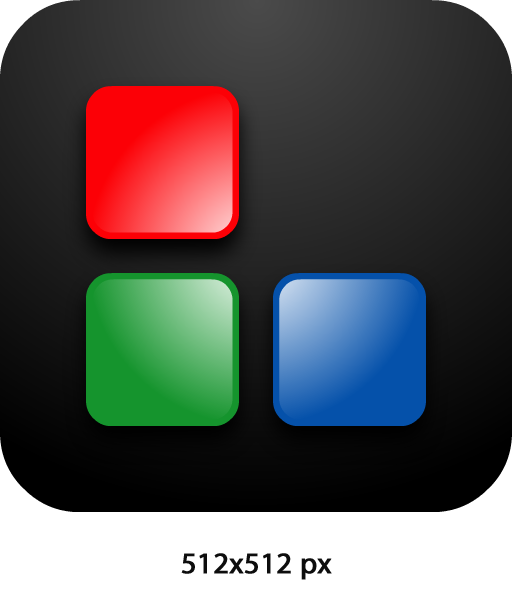
<style>
.page{position:relative;width:512px;height:600px}
.page>*{position:absolute;margin:0}
.t1{font:30px "MyriadPro-Regular";color:#0d0d0d;font-weight:bold}
</style>
<div class="page">
<p class="t1" style="left:181px;top:553px;width:151px;height:27px">512x512 px</p>
</div>
